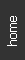
<style>
.page{position:relative;width:25px;height:60px;background:#333333}
.page>*{position:absolute;margin:0}
.t1{font:12px "Tahoma";color:#ffffff}
</style>
<div class="page">
<p class="t1" style="left:7px;top:16px;width:10px;height:30px;rotate:-90deg">home</p>
</div>
